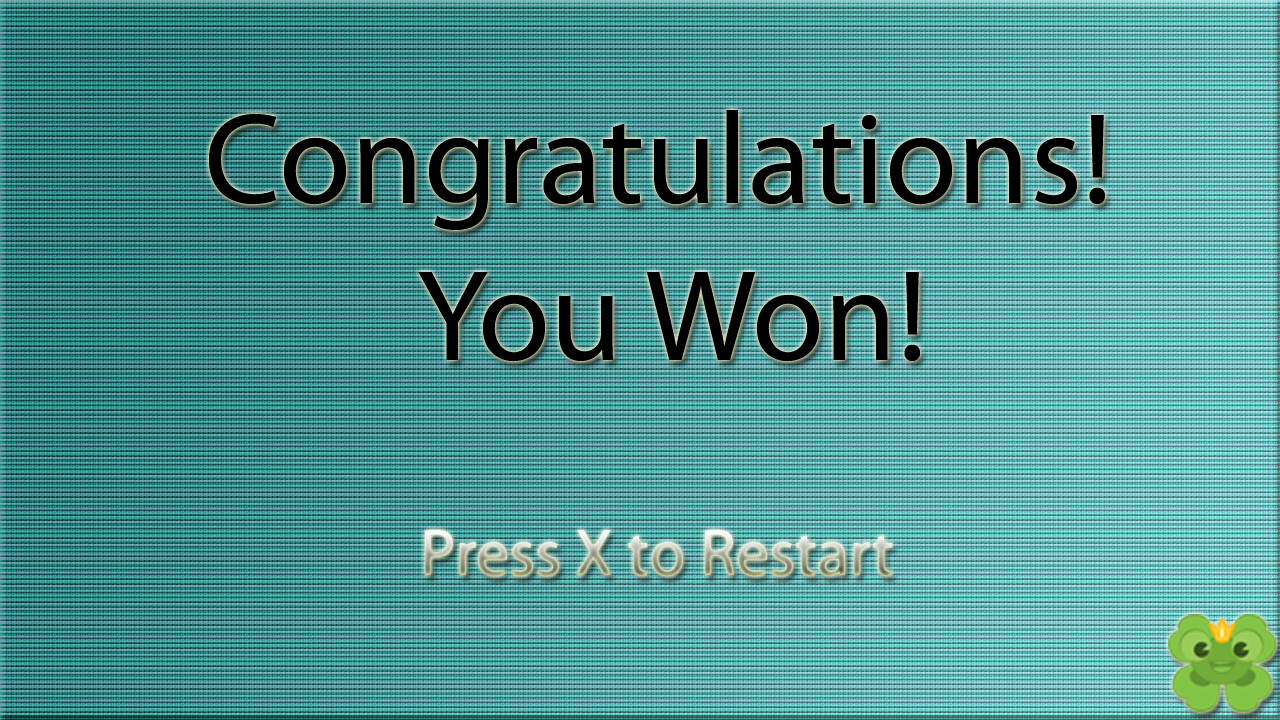
<style>
.page{position:relative;width:1280px;height:720px}
.page>*{position:absolute;margin:0}
.t1{font:131.2px "MyriadPro-Regular";color:#000000}
.t2{font:66.4px "MyriadPro-Regular"}
</style>
<div class="page">
<p class="t1" style="left:209px;top:110px;width:896px;height:252px;text-align:center">Congratulations! <br>You Won!</p>
<p class="t2" style="left:425px;top:530px;width:468px;height:46px">Press X to Restart</p>
</div>
